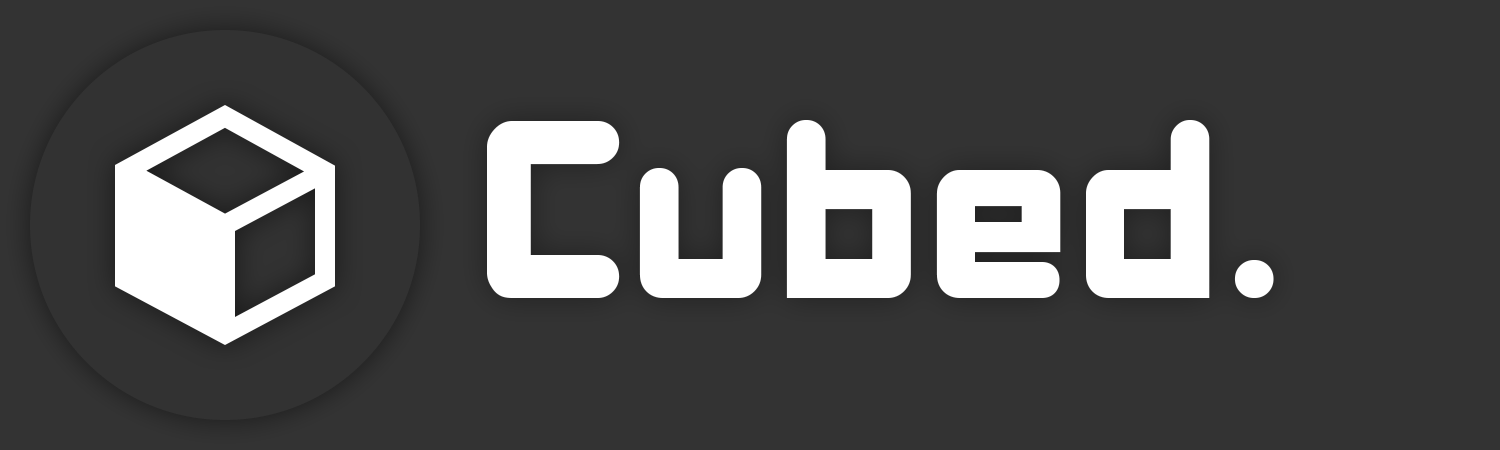
<style>
.page{position:relative;width:1500px;height:450px;background:#333333}
.page>*{position:absolute;margin:0}
.t1{font:260px "DBXLNightfeverWide";color:#ffffff}
</style>
<div class="page">
<p class="t1" style="left:487px;top:120px;width:787px;height:178px">Cubed.</p>
</div>
